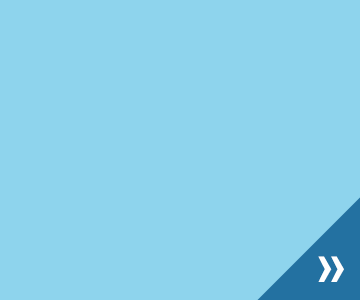
<style>
.page{position:relative;width:360px;height:300px;background:#8ed4ed}
.page>*{position:absolute;margin:0}
.t1{font:65px "UniversLTStd";color:#ffffff}
</style>
<div class="page">
<p class="t1" style="left:318px;top:256px;width:26px;height:26px">»</p>
</div>
